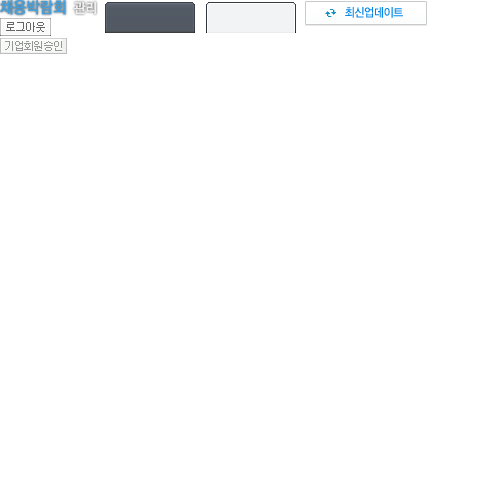
<style>
.page{position:relative;width:500px;height:500px;background:#ffffff}
.page>*{position:absolute;margin:0}
.t1{font:16px "YDIYGO130-KSCpc-EUC-H";letter-spacing:-0.1em;color:#469fd9;font-weight:bold;scale:0.9 1}
.t2{font:14px "YDIYGO130-KSCpc-EUC-H";letter-spacing:-0.1em;color:#f0f0f0;font-weight:bold;scale:0.9 1}
.t3{font:12px "YDIYGO130-KSCpc-EUC-H";letter-spacing:-0.1em;color:#0188e7;scale:0.9 1}
</style>
<div class="page">
<p class="t1" style="left:0px;top:0px;width:66px;height:15px">채용박람회</p>
<p class="t2" style="left:73px;top:1px;width:23px;height:14px">관리</p>
<p class="t3" style="left:345px;top:7px;width:58px;height:11px">최신업데이트</p>
</div>
